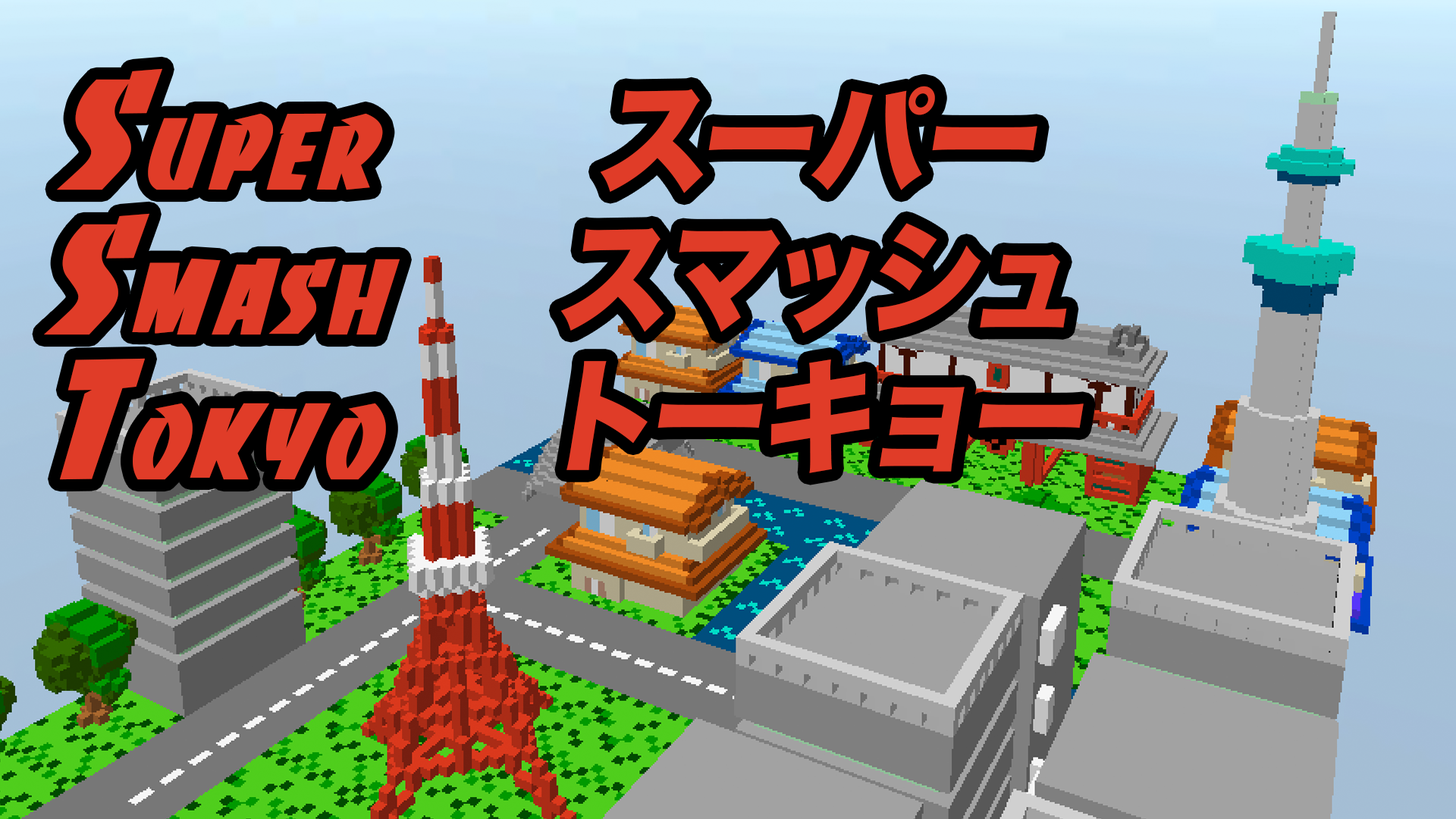
<style>
.page{position:relative;width:1456px;height:819px}
.page>*{position:absolute;margin:0}
.t1{font:149.9px/145px "WofSharpBold";color:#e03c28;font-weight:bold;font-style:italic}
.t2{font:123.5px/139px "HiraKakuStdN-W8";letter-spacing:-0.04em;color:#e03c28;font-weight:bold;font-style:italic;scale:0.92 1}
</style>
<div class="page">
<p class="t1" style="left:44px;top:68px;width:356px;height:412px;text-align:center">Super<br>Smash<br>Tokyo</p>
<p class="t2" style="left:560px;top:86px;width:524px;height:387px;text-align:center">スーパー<br>スマッシュ<br>トーキョー</p>
</div>
